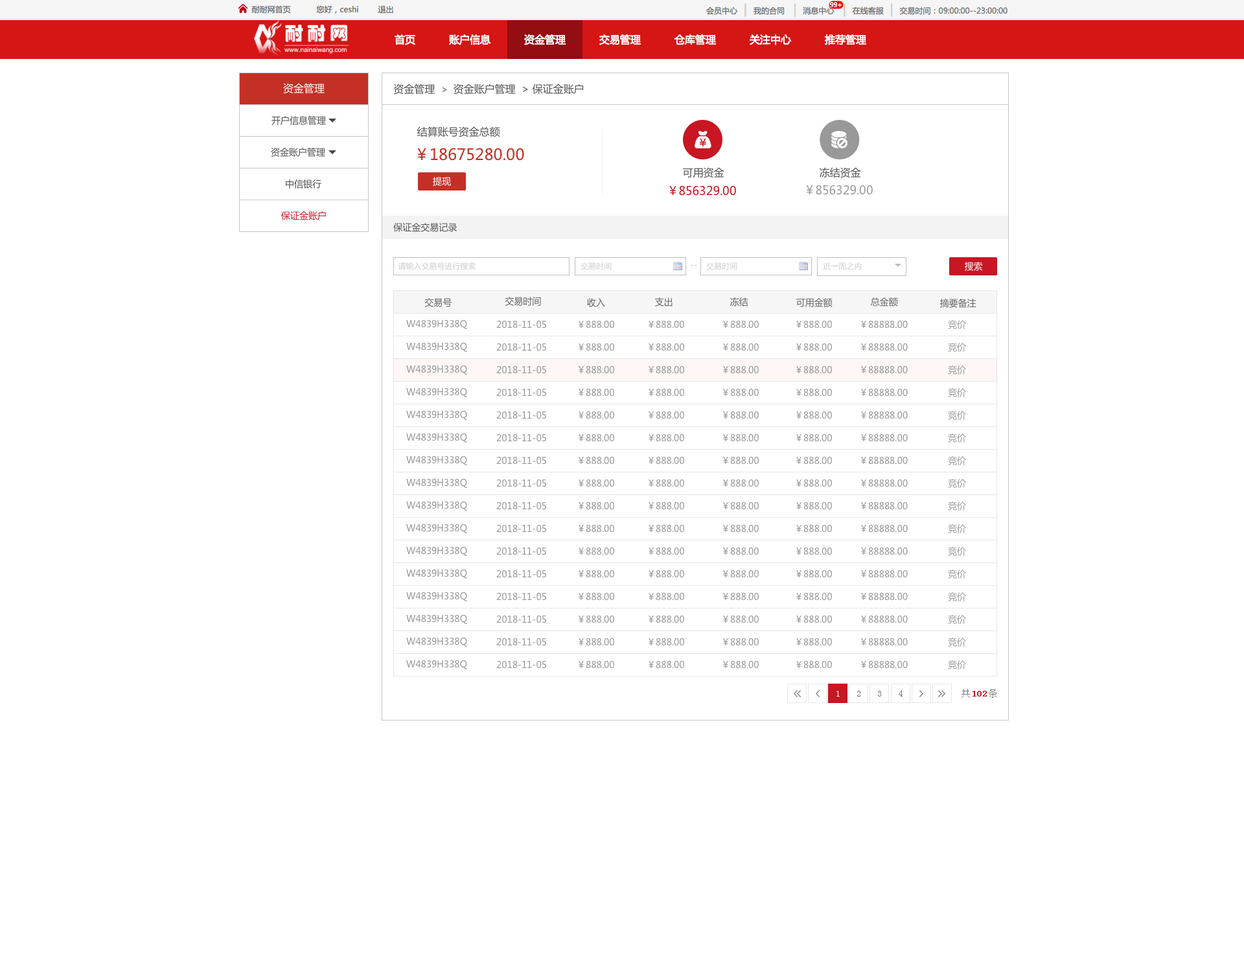
<style>
.page{position:relative;width:1244px;height:959px;background:#ffffff}
.page>*{position:absolute;margin:0}
.t1{font:10.4px "MicrosoftYaHei";color:#ffffff}
.t2{font:10.4px "MicrosoftYaHei";color:#535353}
.t3{font:9.1px "MicrosoftYaHei";color:#535353}
.t4{font:15.5px "MicrosoftYaHei";color:#c53026}
.t5{font:9.1px "MicrosoftYaHei";color:#ffffff}
.t6{font:11.7px "MicrosoftYaHei";color:#c81623}
.t7{font:11.7px "MicrosoftYaHei";color:#999999}
.t8{font:9.1px "MicrosoftYaHei";color:#c81623}
.t9{font:7.8px "MicrosoftYaHei";color:#cccccc}
.t10{font:9.1px "MicrosoftYaHei";color:#cccccc}
.t11{font:9.1px "MicrosoftYaHei";color:#666666}
.t12{font:9.1px "MicrosoftYaHei";color:#999999}
.t13{font:9.1px "SimSun";color:#767676}
.t14{font:9.1px "SimSun";color:#ffffff}
.t15{font:9.1px "SimSun";color:#c81623;font-weight:bold}
</style>
<div class="page">
<p class="t1" style="left:283px;top:83px;width:42px;height:11px">资金管理</p>
<p class="t2" style="left:393px;top:84px;width:191px;height:11px">资金管理  <span class="t3">&gt;  </span>资金账户管理  &gt; 保证金账户</p>
<p class="t3" style="left:271px;top:116px;width:55px;height:9px">开户信息管理</p>
<p class="t2" style="left:417px;top:126px;width:83px;height:11px">结算账号资金总额</p>
<p class="t3" style="left:271px;top:148px;width:54px;height:9px">资金账户管理</p>
<p class="t4" style="left:417px;top:148px;width:107px;height:13px">￥18675280.00</p>
<p class="t2" style="left:682px;top:167px;width:42px;height:11px">可用资金</p>
<p class="t2" style="left:819px;top:167px;width:42px;height:11px">冻结资金</p>
<p class="t3" style="left:286px;top:179px;width:35px;height:10px">中信银行</p>
<p class="t5" style="left:433px;top:177px;width:18px;height:9px">提现</p>
<p class="t6" style="left:669px;top:185px;width:67px;height:11px">￥856329.00</p>
<p class="t7" style="left:806px;top:185px;width:67px;height:10px">￥856329.00</p>
<p class="t8" style="left:281px;top:211px;width:45px;height:9px">保证金账户</p>
<p class="t3" style="left:393px;top:223px;width:64px;height:9px">保证金交易记录</p>
<p class="t9" style="left:398px;top:262px;width:77px;height:8px">请输入交易号进行搜索</p>
<p class="t9" style="left:580px;top:262px;width:32px;height:8px">交易时间</p>
<p class="t10" style="left:691px;top:265px;width:7px;height:1px">--</p>
<p class="t9" style="left:706px;top:262px;width:31px;height:8px">交易时间</p>
<p class="t9" style="left:823px;top:262px;width:39px;height:8px">近一周之内</p>
<p class="t5" style="left:964px;top:262px;width:19px;height:9px">搜索</p>
<p class="t11" style="left:424px;top:298px;width:28px;height:9px">交易号</p>
<p class="t11" style="left:505px;top:297px;width:36px;height:9px">交易时间</p>
<p class="t11" style="left:587px;top:298px;width:18px;height:9px">收入</p>
<p class="t11" style="left:655px;top:297px;width:17px;height:9px">支出</p>
<p class="t11" style="left:730px;top:297px;width:18px;height:9px">冻结</p>
<p class="t11" style="left:795px;top:298px;width:37px;height:9px">可用金额</p>
<p class="t11" style="left:871px;top:297px;width:27px;height:9px">总金额</p>
<p class="t11" style="left:939px;top:299px;width:37px;height:9px">摘要备注</p>
<p class="t12" style="left:406px;top:319px;width:61px;height:10px">W4839H338Q</p>
<p class="t12" style="left:496px;top:320px;width:50px;height:8px">2018-11-05</p>
<p class="t12" style="left:578px;top:320px;width:36px;height:8px">￥888.00</p>
<p class="t12" style="left:648px;top:320px;width:36px;height:8px">￥888.00</p>
<p class="t12" style="left:723px;top:320px;width:36px;height:8px">￥888.00</p>
<p class="t12" style="left:796px;top:320px;width:36px;height:8px">￥888.00</p>
<p class="t12" style="left:861px;top:320px;width:47px;height:8px">￥88888.00</p>
<p class="t12" style="left:948px;top:320px;width:18px;height:9px">竞价</p>
<p class="t12" style="left:406px;top:342px;width:61px;height:10px">W4839H338Q</p>
<p class="t12" style="left:496px;top:343px;width:50px;height:8px">2018-11-05</p>
<p class="t12" style="left:578px;top:343px;width:36px;height:8px">￥888.00</p>
<p class="t12" style="left:648px;top:343px;width:36px;height:8px">￥888.00</p>
<p class="t12" style="left:723px;top:343px;width:36px;height:8px">￥888.00</p>
<p class="t12" style="left:796px;top:343px;width:36px;height:8px">￥888.00</p>
<p class="t12" style="left:861px;top:343px;width:47px;height:8px">￥88888.00</p>
<p class="t12" style="left:948px;top:343px;width:18px;height:9px">竞价</p>
<p class="t12" style="left:406px;top:365px;width:61px;height:9px">W4839H338Q</p>
<p class="t12" style="left:496px;top:365px;width:50px;height:9px">2018-11-05</p>
<p class="t12" style="left:578px;top:365px;width:36px;height:9px">￥888.00</p>
<p class="t12" style="left:648px;top:365px;width:36px;height:9px">￥888.00</p>
<p class="t12" style="left:723px;top:365px;width:36px;height:9px">￥888.00</p>
<p class="t12" style="left:796px;top:365px;width:36px;height:9px">￥888.00</p>
<p class="t12" style="left:861px;top:365px;width:47px;height:9px">￥88888.00</p>
<p class="t12" style="left:948px;top:365px;width:18px;height:9px">竞价</p>
<p class="t12" style="left:406px;top:387px;width:61px;height:10px">W4839H338Q</p>
<p class="t12" style="left:496px;top:388px;width:50px;height:8px">2018-11-05</p>
<p class="t12" style="left:578px;top:388px;width:36px;height:8px">￥888.00</p>
<p class="t12" style="left:648px;top:388px;width:36px;height:8px">￥888.00</p>
<p class="t12" style="left:723px;top:388px;width:36px;height:8px">￥888.00</p>
<p class="t12" style="left:796px;top:388px;width:36px;height:8px">￥888.00</p>
<p class="t12" style="left:861px;top:388px;width:47px;height:8px">￥88888.00</p>
<p class="t12" style="left:948px;top:388px;width:18px;height:9px">竞价</p>
<p class="t12" style="left:406px;top:410px;width:61px;height:10px">W4839H338Q</p>
<p class="t12" style="left:496px;top:411px;width:50px;height:8px">2018-11-05</p>
<p class="t12" style="left:578px;top:411px;width:36px;height:8px">￥888.00</p>
<p class="t12" style="left:648px;top:411px;width:36px;height:8px">￥888.00</p>
<p class="t12" style="left:723px;top:411px;width:36px;height:8px">￥888.00</p>
<p class="t12" style="left:796px;top:411px;width:36px;height:8px">￥888.00</p>
<p class="t12" style="left:861px;top:411px;width:47px;height:8px">￥88888.00</p>
<p class="t12" style="left:948px;top:411px;width:18px;height:9px">竞价</p>
<p class="t12" style="left:406px;top:433px;width:61px;height:9px">W4839H338Q</p>
<p class="t12" style="left:496px;top:433px;width:50px;height:9px">2018-11-05</p>
<p class="t12" style="left:578px;top:433px;width:36px;height:9px">￥888.00</p>
<p class="t12" style="left:648px;top:433px;width:36px;height:9px">￥888.00</p>
<p class="t12" style="left:723px;top:433px;width:36px;height:9px">￥888.00</p>
<p class="t12" style="left:796px;top:433px;width:36px;height:9px">￥888.00</p>
<p class="t12" style="left:861px;top:433px;width:47px;height:9px">￥88888.00</p>
<p class="t12" style="left:948px;top:433px;width:18px;height:9px">竞价</p>
<p class="t12" style="left:406px;top:455px;width:61px;height:10px">W4839H338Q</p>
<p class="t12" style="left:496px;top:456px;width:50px;height:8px">2018-11-05</p>
<p class="t12" style="left:578px;top:456px;width:36px;height:8px">￥888.00</p>
<p class="t12" style="left:648px;top:456px;width:36px;height:8px">￥888.00</p>
<p class="t12" style="left:723px;top:456px;width:36px;height:8px">￥888.00</p>
<p class="t12" style="left:796px;top:456px;width:36px;height:8px">￥888.00</p>
<p class="t12" style="left:861px;top:456px;width:47px;height:8px">￥88888.00</p>
<p class="t12" style="left:948px;top:456px;width:18px;height:9px">竞价</p>
<p class="t12" style="left:406px;top:478px;width:61px;height:10px">W4839H338Q</p>
<p class="t12" style="left:496px;top:479px;width:50px;height:8px">2018-11-05</p>
<p class="t12" style="left:578px;top:479px;width:36px;height:8px">￥888.00</p>
<p class="t12" style="left:648px;top:479px;width:36px;height:8px">￥888.00</p>
<p class="t12" style="left:723px;top:479px;width:36px;height:8px">￥888.00</p>
<p class="t12" style="left:796px;top:479px;width:36px;height:8px">￥888.00</p>
<p class="t12" style="left:861px;top:479px;width:47px;height:8px">￥88888.00</p>
<p class="t12" style="left:948px;top:479px;width:18px;height:9px">竞价</p>
<p class="t12" style="left:406px;top:501px;width:61px;height:9px">W4839H338Q</p>
<p class="t12" style="left:496px;top:501px;width:50px;height:9px">2018-11-05</p>
<p class="t12" style="left:578px;top:501px;width:36px;height:9px">￥888.00</p>
<p class="t12" style="left:648px;top:501px;width:36px;height:9px">￥888.00</p>
<p class="t12" style="left:723px;top:501px;width:36px;height:9px">￥888.00</p>
<p class="t12" style="left:796px;top:501px;width:36px;height:9px">￥888.00</p>
<p class="t12" style="left:861px;top:501px;width:47px;height:9px">￥88888.00</p>
<p class="t12" style="left:948px;top:501px;width:18px;height:9px">竞价</p>
<p class="t12" style="left:406px;top:523px;width:61px;height:10px">W4839H338Q</p>
<p class="t12" style="left:496px;top:524px;width:50px;height:8px">2018-11-05</p>
<p class="t12" style="left:578px;top:524px;width:36px;height:8px">￥888.00</p>
<p class="t12" style="left:648px;top:524px;width:36px;height:8px">￥888.00</p>
<p class="t12" style="left:723px;top:524px;width:36px;height:8px">￥888.00</p>
<p class="t12" style="left:796px;top:524px;width:36px;height:8px">￥888.00</p>
<p class="t12" style="left:861px;top:524px;width:47px;height:8px">￥88888.00</p>
<p class="t12" style="left:948px;top:524px;width:18px;height:9px">竞价</p>
<p class="t12" style="left:406px;top:546px;width:61px;height:10px">W4839H338Q</p>
<p class="t12" style="left:496px;top:547px;width:50px;height:8px">2018-11-05</p>
<p class="t12" style="left:578px;top:547px;width:36px;height:8px">￥888.00</p>
<p class="t12" style="left:648px;top:547px;width:36px;height:8px">￥888.00</p>
<p class="t12" style="left:723px;top:547px;width:36px;height:8px">￥888.00</p>
<p class="t12" style="left:796px;top:547px;width:36px;height:8px">￥888.00</p>
<p class="t12" style="left:861px;top:547px;width:47px;height:8px">￥88888.00</p>
<p class="t12" style="left:948px;top:547px;width:18px;height:9px">竞价</p>
<p class="t12" style="left:406px;top:569px;width:61px;height:9px">W4839H338Q</p>
<p class="t12" style="left:496px;top:569px;width:50px;height:9px">2018-11-05</p>
<p class="t12" style="left:578px;top:569px;width:36px;height:9px">￥888.00</p>
<p class="t12" style="left:648px;top:569px;width:36px;height:9px">￥888.00</p>
<p class="t12" style="left:723px;top:569px;width:36px;height:9px">￥888.00</p>
<p class="t12" style="left:796px;top:569px;width:36px;height:9px">￥888.00</p>
<p class="t12" style="left:861px;top:569px;width:47px;height:9px">￥88888.00</p>
<p class="t12" style="left:948px;top:569px;width:18px;height:9px">竞价</p>
<p class="t12" style="left:406px;top:591px;width:61px;height:10px">W4839H338Q</p>
<p class="t12" style="left:496px;top:592px;width:50px;height:9px">2018-11-05</p>
<p class="t12" style="left:578px;top:592px;width:36px;height:9px">￥888.00</p>
<p class="t12" style="left:648px;top:592px;width:36px;height:9px">￥888.00</p>
<p class="t12" style="left:723px;top:592px;width:36px;height:9px">￥888.00</p>
<p class="t12" style="left:796px;top:592px;width:36px;height:9px">￥888.00</p>
<p class="t12" style="left:861px;top:592px;width:47px;height:9px">￥88888.00</p>
<p class="t12" style="left:948px;top:592px;width:18px;height:9px">竞价</p>
<p class="t12" style="left:406px;top:614px;width:61px;height:10px">W4839H338Q</p>
<p class="t12" style="left:496px;top:615px;width:50px;height:8px">2018-11-05</p>
<p class="t12" style="left:578px;top:615px;width:36px;height:8px">￥888.00</p>
<p class="t12" style="left:648px;top:615px;width:36px;height:8px">￥888.00</p>
<p class="t12" style="left:723px;top:615px;width:36px;height:8px">￥888.00</p>
<p class="t12" style="left:796px;top:615px;width:36px;height:8px">￥888.00</p>
<p class="t12" style="left:861px;top:615px;width:47px;height:8px">￥88888.00</p>
<p class="t12" style="left:948px;top:615px;width:18px;height:9px">竞价</p>
<p class="t12" style="left:406px;top:637px;width:61px;height:9px">W4839H338Q</p>
<p class="t12" style="left:496px;top:637px;width:50px;height:9px">2018-11-05</p>
<p class="t12" style="left:578px;top:637px;width:36px;height:9px">￥888.00</p>
<p class="t12" style="left:648px;top:637px;width:36px;height:9px">￥888.00</p>
<p class="t12" style="left:723px;top:637px;width:36px;height:9px">￥888.00</p>
<p class="t12" style="left:796px;top:637px;width:36px;height:9px">￥888.00</p>
<p class="t12" style="left:861px;top:637px;width:47px;height:9px">￥88888.00</p>
<p class="t12" style="left:948px;top:637px;width:18px;height:9px">竞价</p>
<p class="t12" style="left:406px;top:659px;width:61px;height:10px">W4839H338Q</p>
<p class="t12" style="left:496px;top:660px;width:50px;height:9px">2018-11-05</p>
<p class="t12" style="left:578px;top:660px;width:36px;height:9px">￥888.00</p>
<p class="t12" style="left:648px;top:660px;width:36px;height:9px">￥888.00</p>
<p class="t12" style="left:723px;top:660px;width:36px;height:9px">￥888.00</p>
<p class="t12" style="left:796px;top:660px;width:36px;height:9px">￥888.00</p>
<p class="t12" style="left:861px;top:660px;width:47px;height:9px">￥88888.00</p>
<p class="t12" style="left:948px;top:660px;width:18px;height:9px">竞价</p>
<p class="t13" style="left:898px;top:690px;width:4px;height:6px">4</p>
<p class="t13" style="left:961px;top:689px;width:36px;height:9px">共    条</p>
<p class="t14" style="left:836px;top:691px;width:4px;height:5px">1</p>
<p class="t13" style="left:857px;top:691px;width:3px;height:5px">2</p>
<p class="t13" style="left:878px;top:691px;width:3px;height:5px">3</p>
<p class="t15" style="left:972px;top:691px;width:15px;height:5px">102</p>
</div>
